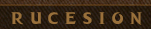
<style>
.page{position:relative;width:151px;height:29px}
.page>*{position:absolute;margin:0}
.t1{font:16px "DRAGONHUNTER";color:#99703b}
</style>
<div class="page">
<p class="t1" style="left:11px;top:12px;width:131px;height:13px">R U C E S I O N</p>
</div>
